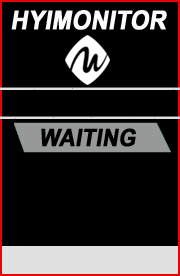
<style>
.page{position:relative;width:180px;height:276px;background:#000000}
.page>*{position:absolute;margin:0}
.t1{font:26px "Arial-BoldMT";color:#fbfbfb;font-weight:bold;font-style:italic;scale:0.9 1}
.t2{font:24px "Arial-BoldMT";color:#010101;font-weight:bold;font-style:italic;scale:0.9 1}
</style>
<div class="page">
<p class="t1" style="left:11px;top:10px;width:156px;height:20px">HYIMONITOR</p>
<p class="t2" style="left:41px;top:128px;width:95px;height:19px">WAITING</p>
</div>
